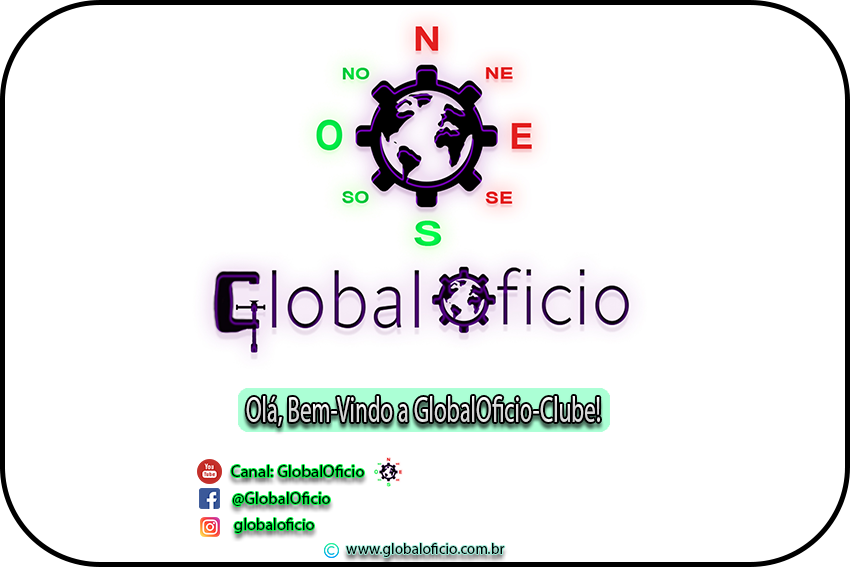
<style>
.page{position:relative;width:850px;height:567px;background:#ffffff}
.page>*{position:absolute;margin:0}
.t1{font:36.5px "MyriadPro-Regular";color:#d9d9d9;scale:0.63 1}
.t2{font:16.7px "MyriadPro-Regular";color:#000000}
.t3{font:16.3px "MyriadPro-Regular";color:#000000}
.t4{font:15.2px "MyriadPro-Regular";color:#000000}
</style>
<div class="page">
<p class="t1" style="left:246px;top:396px;width:354px;height:31px">Olá, Bem-Vindo a GlobalOficio-Clube!</p>
<p class="t2" style="left:231px;top:465px;width:133px;height:12px">Canal: GlobalOficio</p>
<p class="t2" style="left:232px;top:492px;width:98px;height:14px">@GlobalOficio</p>
<p class="t3" style="left:234px;top:518px;width:80px;height:15px">globaloficio</p>
<p class="t4" style="left:346px;top:543px;width:159px;height:14px">www.globaloficio.com.br</p>
</div>
